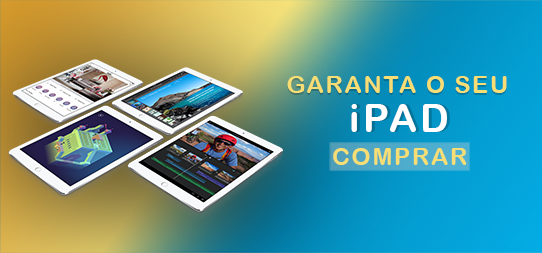
<style>
.page{position:relative;width:542px;height:253px}
.page>*{position:absolute;margin:0}
.t1{font:24px "ArialRoundedMTBold";letter-spacing:0.075em}
.t2{font:24px "ArialRoundedMTBold";letter-spacing:0.075em;color:#f6de74}
.t3{font:39.1px "ArialRoundedMTBold";letter-spacing:0.075em;color:#ffffff}
.t4{font:39.1px "ArialRoundedMTBold";letter-spacing:0.075em}
</style>
<div class="page">
<p class="t1" style="left:287px;top:78px;width:220px;height:17px">GARANTA O SEU</p>
<p class="t2" style="left:287px;top:76px;width:220px;height:17px">GARANTA O SEU</p>
<p class="t3" style="left:351px;top:104px;width:96px;height:28px">iPAD</p>
<p class="t4" style="left:354px;top:104px;width:96px;height:28px">iPAD</p>
<p class="t2" style="left:333px;top:148px;width:134px;height:17px">COMPRAR</p>
</div>
